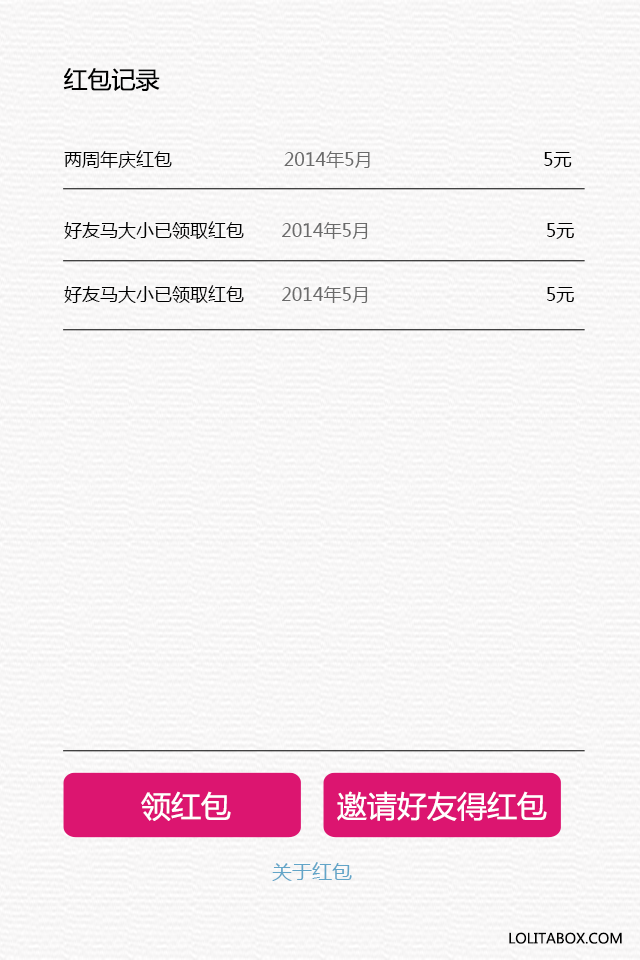
<style>
.page{position:relative;width:640px;height:960px}
.page>*{position:absolute;margin:0}
.t1{font:24px "MicrosoftYaHei";color:#000000}
.t2{font:18px "MicrosoftYaHei";color:#6b6b6b}
.t3{font:18px "MicrosoftYaHei";color:#000000}
.t4{font:30px "MicrosoftYaHei";color:#ffffff}
.t5{font:20px "MicrosoftYaHei";color:#62a5c8}
.t6{font:14px "MicrosoftYaHei";color:#000000}
</style>
<div class="page">
<p class="t1" style="left:63px;top:68px;width:97px;height:23px">红包记录</p>
<p class="t2" style="left:64px;top:150px;width:508px;height:18px"><span class="t3">两周年庆红包                     </span>2014年5月<span class="t3">                                5元</span></p>
<p class="t3" style="left:64px;top:221px;width:510px;height:18px">好友马大小已领取红包       <span class="t2">2014年5月</span>                                 5元</p>
<p class="t3" style="left:64px;top:285px;width:510px;height:18px">好友马大小已领取红包       <span class="t2">2014年5月</span>                                 5元</p>
<p class="t4" style="left:141px;top:791px;width:90px;height:30px">领红包</p>
<p class="t4" style="left:337px;top:791px;width:210px;height:30px">邀请好友得红包</p>
<p class="t5" style="left:272px;top:862px;width:80px;height:19px">关于红包</p>
<p class="t6" style="left:509px;top:932px;width:113px;height:12px">LOLITABOX.COM</p>
</div>
